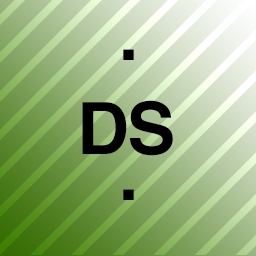
<style>
.page{position:relative;width:256px;height:256px}
.page>*{position:absolute;margin:0}
.t1{font:72px "Helvetica-Bold";letter-spacing:-0.025em;color:#000000}
</style>
<div class="page">
<p class="t1" style="left:123px;top:49px;width:11px;height:11px">.</p>
<p class="t1" style="left:82px;top:100px;width:91px;height:56px">DS</p>
<p class="t1" style="left:123px;top:189px;width:11px;height:11px">.</p>
</div>
